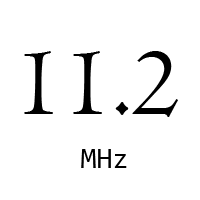
<style>
.page{position:relative;width:200px;height:200px;background:#ffffff}
.page>*{position:absolute;margin:0}
.t1{font:100px "Centaur";color:#000000}
.t2{font:29.2px "Consolas";color:#000000}
</style>
<div class="page">
<p class="t1" style="left:24px;top:51px;width:154px;height:66px">11.2</p>
<p class="t2" style="left:81px;top:149px;width:46px;height:19px">MHz</p>
</div>
